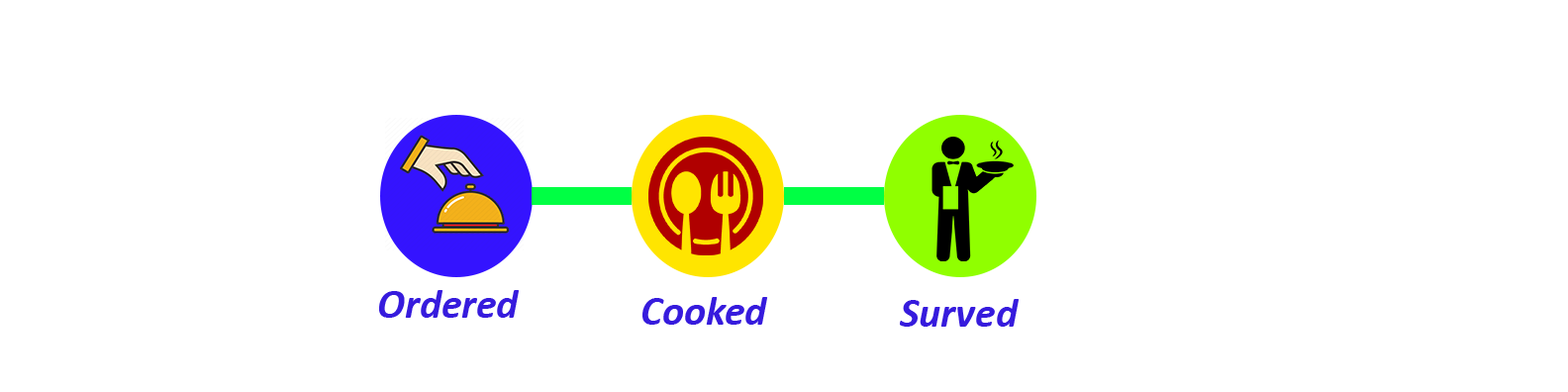
<style>
.page{position:relative;width:1568px;height:392px;background:#ffffff}
.page>*{position:absolute;margin:0}
.t1{font:41.2px "Calibri-BoldItalic";color:#361bdd}
</style>
<div class="page">
<p class="t1" style="left:379px;top:290px;width:141px;height:28px">Ordered</p>
<p class="t1" style="left:642px;top:297px;width:126px;height:28px">Cooked</p>
<p class="t1" style="left:900px;top:299px;width:120px;height:28px">Surved</p>
</div>
